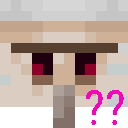
<style>
.page{position:relative;width:128px;height:128px;background:#dbcdc2}
.page>*{position:absolute;margin:0}
.t1{font:49px "RobotoCondensed-Regular";color:#f900bc}
</style>
<div class="page">
<p class="t1" style="left:86px;top:90px;width:38px;height:35px">??</p>
</div>
